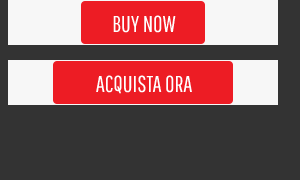
<style>
.page{position:relative;width:300px;height:180px;background:#333333}
.page>*{position:absolute;margin:0}
.t1{font:23px "PathwayGothicOne-Book";color:#ffffff;text-transform:uppercase}
</style>
<div class="page">
<p class="t1" style="left:113px;top:15px;width:63px;height:18px">BUY now</p>
<p class="t1" style="left:96px;top:75px;width:96px;height:19px">Acquista ora</p>
</div>
